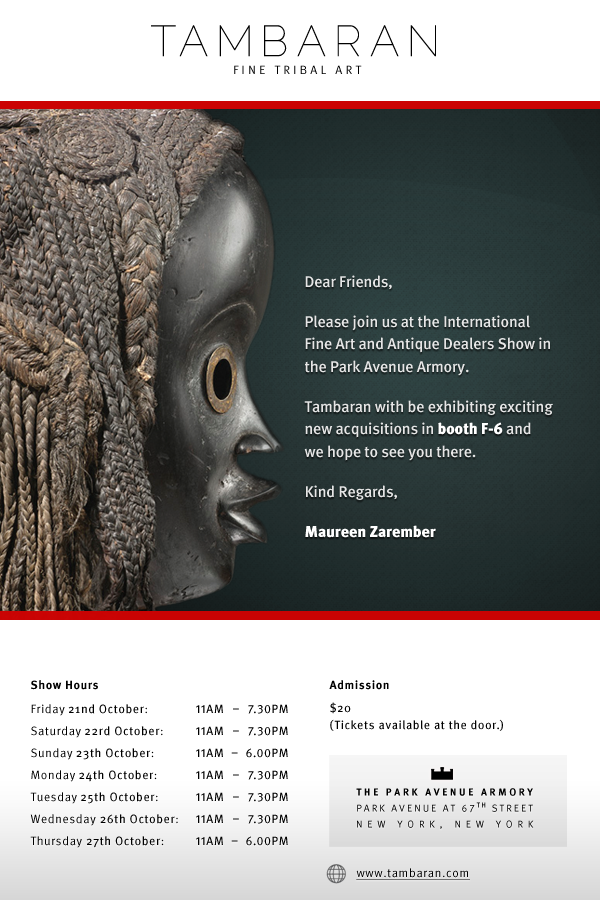
<style>
.page{position:relative;width:600px;height:900px;background:#ffffff}
.page>*{position:absolute;margin:0}
.t1{font:43.2px "Raleway-Thin";letter-spacing:0.19em;color:#000000}
.t2{font:12px "MetaPro-Normal";letter-spacing:0.27em;color:#000000;text-transform:uppercase}
.t3{font:15.7px/22.4px "MetaPro-Medium";letter-spacing:-0.01em;color:#e6e6e6}
.t4{font:15.7px/22.4px "MetaPro-Black";letter-spacing:-0.01em;color:#ffffff}
.t5{font:12px/22px "MetaPro-Normal";letter-spacing:0.05em;color:#000000}
.t6{font:12px/20px "MetaPro-Bold";letter-spacing:0.05em;color:#000000}
.t7{font:12px/2px "MetaPro-Bold";letter-spacing:0.05em;color:#000000}
.t8{font:12px/22px "MetaPro-Book";letter-spacing:0.05em;color:#000000}
.t9{font:12px/17px "MetaPro-Book";letter-spacing:0.05em;color:#000000}
.t10{font:12px/6px "MetaPro-Book";letter-spacing:0.05em;color:#000000}
.t11{font:12px/22px "MetaPro-Book";letter-spacing:0.05em;color:#000000;text-transform:uppercase}
.t12{font:10px/16px "MetaPro-Bold";letter-spacing:0.27em;color:#000000;text-transform:uppercase}
.t13{font:10px/16px "MetaPro-Normal";letter-spacing:0.205em;color:#000000;text-transform:uppercase}
.t14{font:7px/16px "MetaPro-Medium";letter-spacing:0.205em;color:#000000;text-transform:uppercase}
.t15{font:10px/16px "MetaPro-Normal";letter-spacing:0.48em;color:#000000;text-transform:uppercase}
.t16{font:12px "MetaPro-Normal";letter-spacing:0.05em;color:#000000;text-decoration:underline}
.t17{font:12px "MetaPro-Bold";letter-spacing:0.05em;color:#000000}
</style>
<div class="page">
<p class="t1" style="left:151px;top:25px;width:285px;height:32px">TAMBARAN</p>
<p class="t2" style="left:234px;top:65px;width:128px;height:9px">fine tribal art</p>
<p class="t3" style="left:304px;top:275px;width:249px;height:263px">Dear Friends,<br>Please join us at the International Fine Art and Antique Dealers Show in the Park Avenue Armory.<br>Tambaran with be exhibiting exciting new acquisitions in <span class="t4">booth F-6</span> and <br>we hope to see you there.<br>Kind Regards,<br><span class="t4">Maureen Zarember</span></p>
<p class="t5" style="left:30px;top:680px;width:148px;height:168px"><span class="t6">Show Hours<br></span><span class="t7"><br></span>Friday <span class="t8">21nd October</span>:<br>Saturday <span class="t8">22rd October</span>:      <br>Sunday <span class="t8">23th October</span>:       <br>Monday <span class="t8">24th October</span>:        <br>Tuesday <span class="t8">25th October</span>:       <br>Wednesday <span class="t8">26th October</span>: <br>Thursday <span class="t8">27th October</span>:</p>
<p class="t9" style="left:329px;top:680px;width:174px;height:51px"><span class="t6">Admission<br></span><span class="t10"><br></span>$20 <br>(Tickets available at the door.)</p>
<p class="t11" style="left:196px;top:704px;width:92px;height:142px;text-align:justify">11am – 7.30pm<br>11am – 7.30pm<br>11am – 6.00pm <br>11am – 7.30pm<br>11am – 7.30pm<br>11am – 7.30pm<br>11am – 6.00pm</p>
<p class="t12" style="left:356px;top:788px;width:178px;height:41px;text-align:center">The Park Avenue Armory<br><span class="t13">Park Avenue at 67</span><span class="t14">th</span><span class="t13"> Street<br></span><span class="t15">New York, New York</span></p>
<p class="t16" style="left:356px;top:868px;width:114px;height:12px"><span class="t17">        </span>www.tambaran.com</p>
</div>
